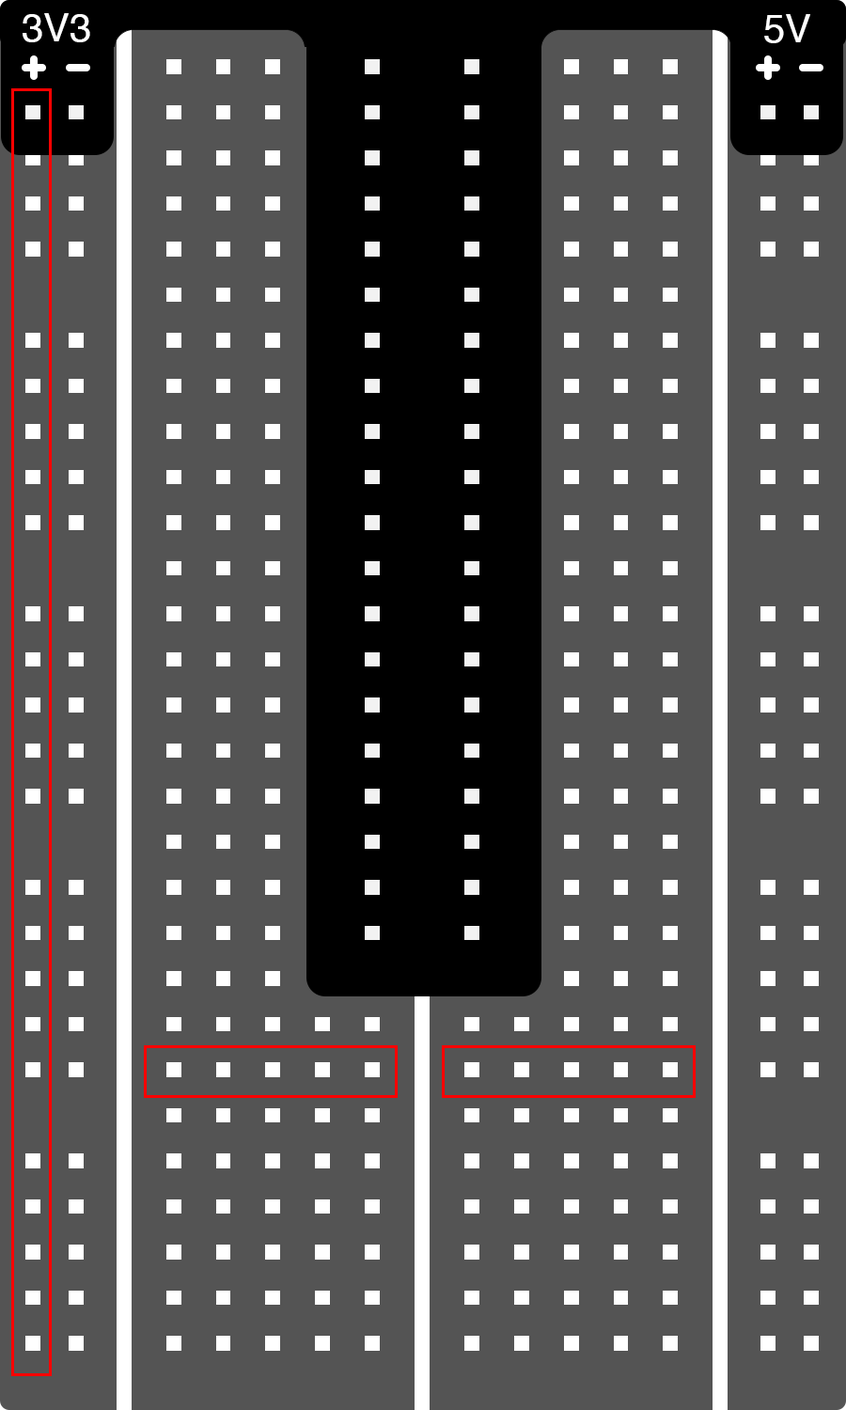
<style>
.page{position:relative;width:846px;height:1410px;background:#545454}
.page>*{position:absolute;margin:0}
.t1{font:39.2px "Helvetica";color:#ffffff}
</style>
<div class="page">
<p class="t1" style="left:23px;top:13px;width:67px;height:29px">3V3</p>
<p class="t1" style="left:764px;top:14px;width:46px;height:29px">5V</p>
</div>
